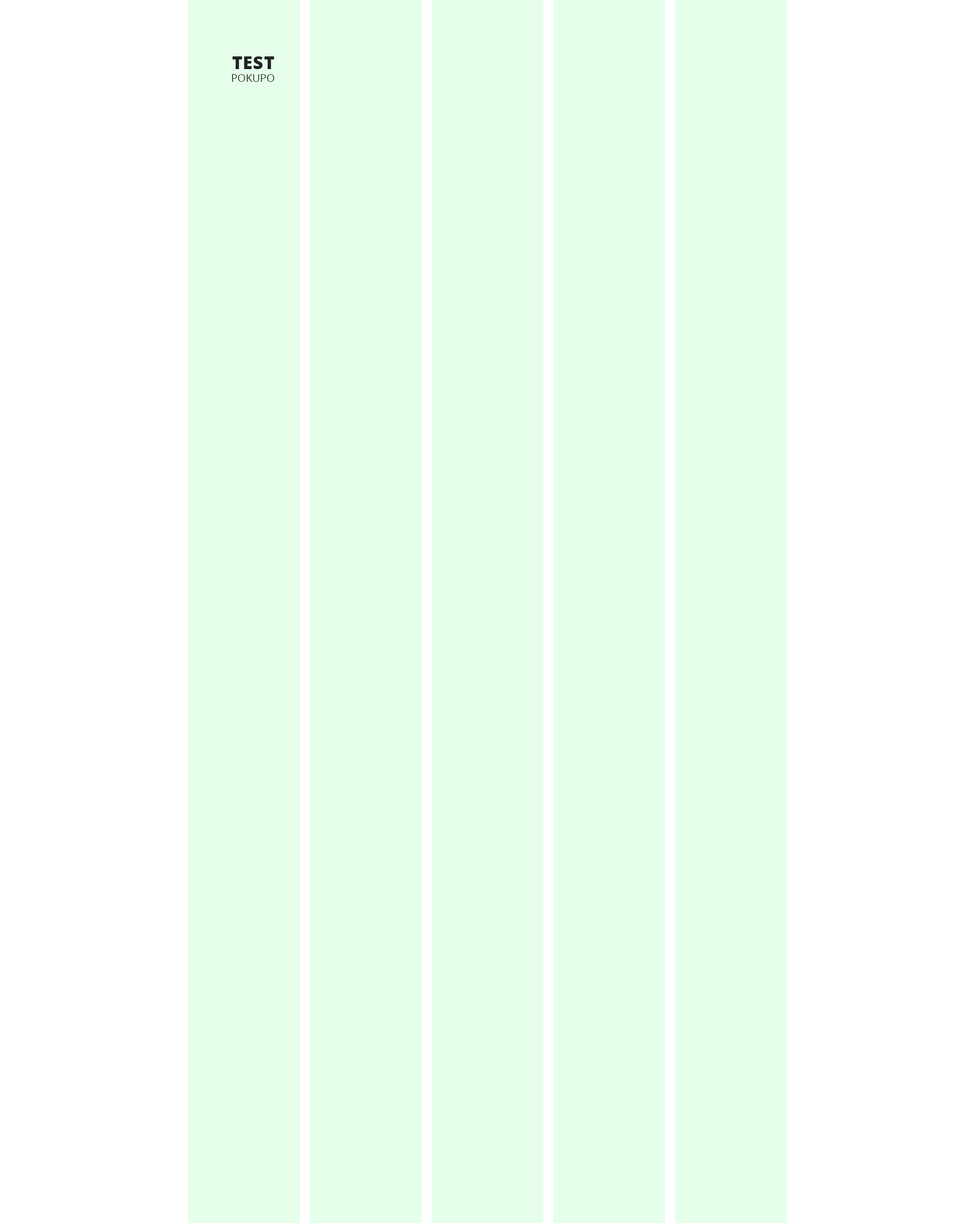
<style>
.page{position:relative;width:975px;height:1223px;background:#e5ffeb}
.page>*{position:absolute;margin:0}
.t1{font:17.8px "OpenSans-Extrabold";letter-spacing:0.025em;color:#232323;text-transform:uppercase}
.t2{font:10.7px "OpenSans";color:#333333;text-transform:uppercase}
</style>
<div class="page">
<p class="t1" style="left:232px;top:56px;width:42px;height:13px">test</p>
<p class="t2" style="left:232px;top:74px;width:42px;height:8px">Pokupo</p>
</div>
